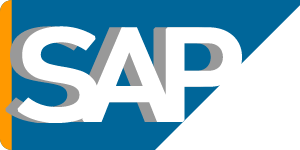
<style>
.page{position:relative;width:300px;height:150px;background:#ffffff}
.page>*{position:absolute;margin:0}
.t1{font:127.9px "Bahnschrift";letter-spacing:-0.18em;font-weight:bold;scale:1.16 1}
.t2{font:127.9px "Bahnschrift";letter-spacing:-0.18em;color:#ffffff;font-weight:bold;scale:1.16 1}
</style>
<div class="page">
<p class="t1" style="left:5px;top:26px;width:225px;height:97px">SAP</p>
<p class="t2" style="left:17px;top:26px;width:225px;height:97px">SAP</p>
</div>
